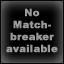
<style>
.page{position:relative;width:64px;height:64px}
.page>*{position:absolute;margin:0}
.t1{font:10px "Arial-Black";color:#999999;font-weight:bold}
</style>
<div class="page">
<p class="t1" style="left:6px;top:8px;width:52px;height:45px;text-align:center">No<br>Matchbreaker available</p>
</div>
